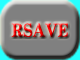
<style>
.page{position:relative;width:80px;height:60px;background:#808080}
.page>*{position:absolute;margin:0}
.t1{font:18px "MyungjoXB-HM"}
</style>
<div class="page">
<p class="t1" style="left:11px;top:23px;width:57px;height:14px">RSAVE</p>
</div>
